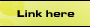
<style>
.page{position:relative;width:90px;height:27px}
.page>*{position:absolute;margin:0}
.t1{font:10px "MicrogrammaD-BoldExte";letter-spacing:0.05em;color:#000000}
</style>
<div class="page">
<p class="t1" style="left:17px;top:10px;width:58px;height:7px">Link here</p>
</div>
